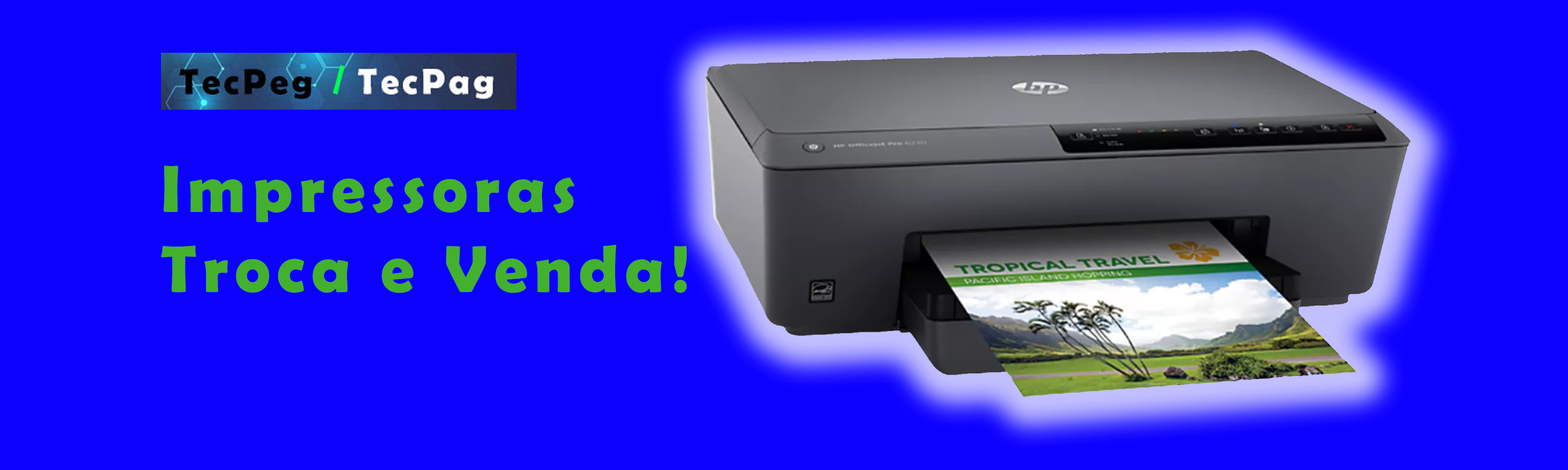
<style>
.page{position:relative;width:1568px;height:470px;background:#0c00ff}
.page>*{position:absolute;margin:0}
.t1{font:66.8px "BerlinSansFBDemi-Bold";letter-spacing:0.1em;color:#43b12d}
</style>
<div class="page">
<p class="t1" style="left:161px;top:166px;width:526px;height:127px">Impressoras<br>Troca e Venda!</p>
</div>
